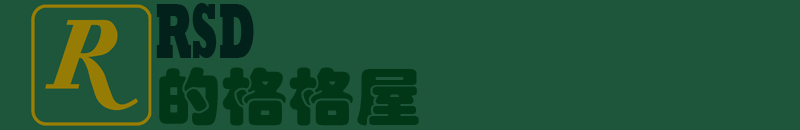
<style>
.page{position:relative;width:800px;height:130px;background:#1e563b}
.page>*{position:absolute;margin:0}
.t1{font:79.5px "Rockwell-ExtraBold";color:#01211a;scale:0.54 1}
.t2{font:61.7px "STHupo";color:#013616;scale:1.08 1}
</style>
<div class="page">
<p class="t1" style="left:156px;top:3px;width:98px;height:55px">RSD</p>
<p class="t2" style="left:159px;top:67px;width:260px;height:59px">的格格屋</p>
</div>
